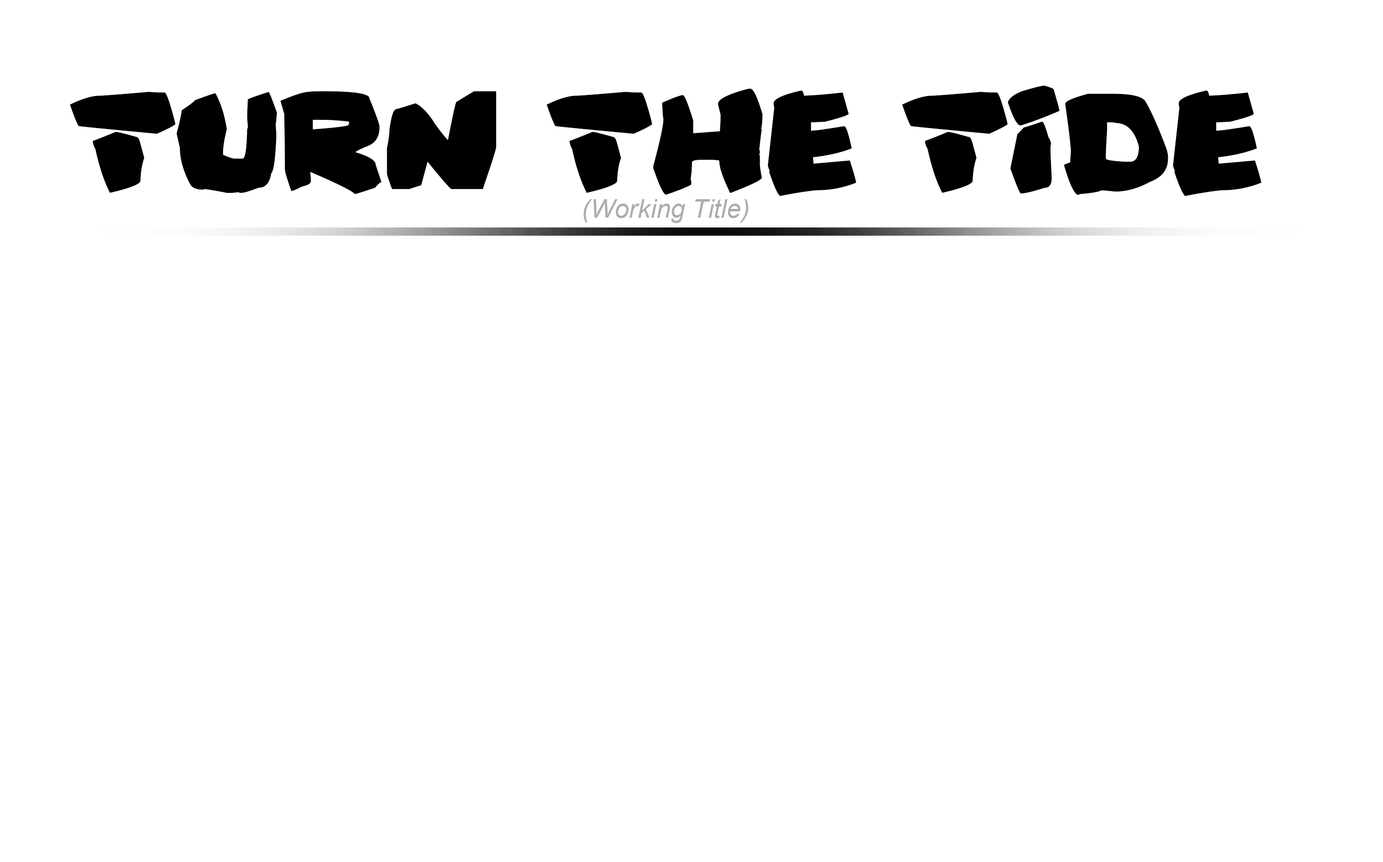
<style>
.page{position:relative;width:1383px;height:862px;background:#ffffff}
.page>*{position:absolute;margin:0}
.t1{font:55.7px "PrehistoricCaveman";color:#000000}
.t2{font:25.9px "Arial-ItalicMT";color:#acacac}
</style>
<div class="page">
<p class="t1" style="left:70px;top:85px;width:1192px;height:111px">TURn THE TIDE</p>
<p class="t2" style="left:583px;top:199px;width:166px;height:24px">(Working Title)</p>
</div>
